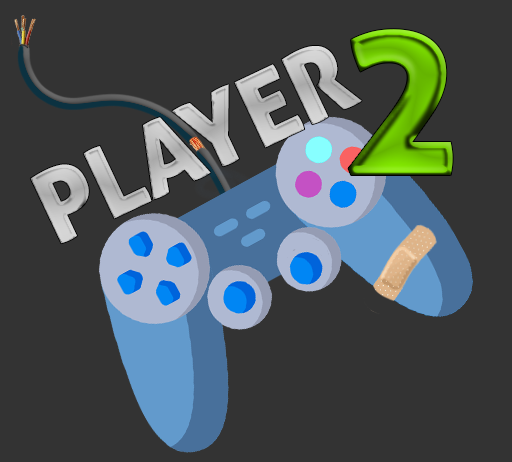
<style>
.page{position:relative;width:512px;height:462px;background:#333333}
.page>*{position:absolute;margin:0}
.t1{font:220px "AllerDisplay"}
.t2{font:100px "AllerDisplay";color:#c1c1c1}
</style>
<div class="page">
<p class="t1" style="left:348px;top:29px;width:105px;height:146px">2</p>
<p class="t2" style="left:30px;top:46px;width:332px;height:198px;rotate:-25deg">PLAYER</p>
</div>
